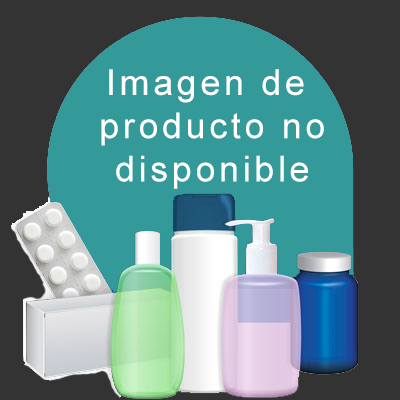
<style>
.page{position:relative;width:400px;height:400px;background:#333333}
.page>*{position:absolute;margin:0}
.t1{font:36px "ArialMT";letter-spacing:0.1em;color:#ffffff}
</style>
<div class="page">
<p class="t1" style="left:101px;top:69px;width:223px;height:120px;text-align:center">Imagen de <br>producto no<br>disponible</p>
</div>
